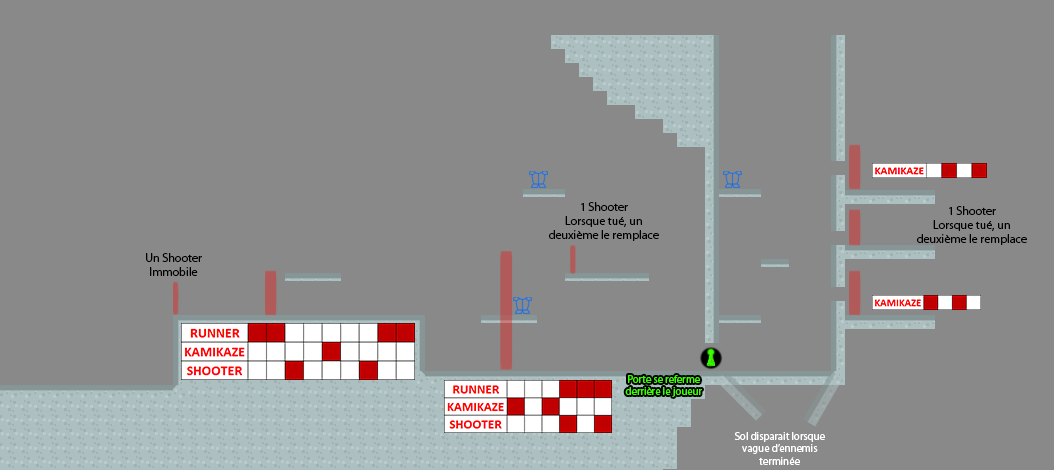
<style>
.page{position:relative;width:1054px;height:470px;background:#898989}
.page>*{position:absolute;margin:0}
.t1{font:12px "MyriadPro-Regular";color:#000000}
.t2{font:10.7px "MyriadPro-Regular";color:#3bff00}
.t3{font:10.7px "MyriadPro-Regular";color:#ffffff}
</style>
<div class="page">
<p class="t1" style="left:549px;top:202px;width:110px;height:39px;text-align:center">1 Shooter<br>Lorsque tué, un deuxième le remplace</p>
<p class="t1" style="left:917px;top:206px;width:110px;height:39px;text-align:center">1 Shooter<br>Lorsque tué, un deuxième le remplace</p>
<p class="t1" style="left:146px;top:253px;width:56px;height:23px;text-align:center">Un Shooter<br>Immobile</p>
<p class="t2" style="left:625px;top:375px;width:77px;height:22px;text-align:center">Porte se referme derrière le joueur</p>
<p class="t3" style="left:734px;top:432px;width:91px;height:33px;text-align:center">Sol disparait lorsque vague d’ennemis terminée</p>
</div>
